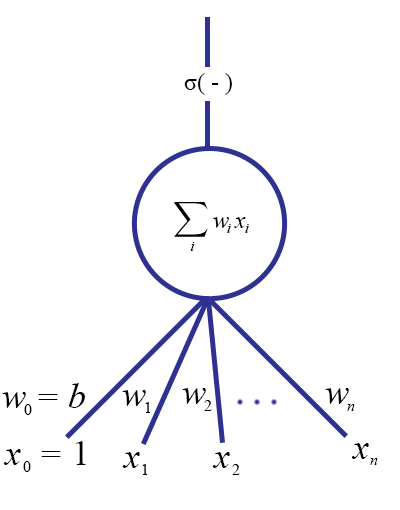
<style>
.page{position:relative;width:400px;height:510px;background:#ffffff}
.page>*{position:absolute;margin:0}
.t1{font:24px "TimesNewRomanPSMT";color:#000000}
.t2{font:24px "TimesNewRomanPS-ItalicMT";color:#000000}
.t3{font:14px "TimesNewRomanPS-ItalicMT";color:#000000}
.t4{font:36px "TimesNewRomanPS-ItalicMT";color:#000000}
.t5{font:16.4px "TimesNewRomanPSMT";color:#000000}
.t6{font:16.4px "TimesNewRomanPS-ItalicMT";color:#000000}
.t7{font:36px "TimesNewRomanPSMT";color:#000000}
</style>
<div class="page">
<p class="t1" style="left:184px;top:73px;width:48px;height:22px">σ( - )</p>
<p class="t2" style="left:213px;top:217px;width:33px;height:11px">w x</p>
<p class="t3" style="left:227px;top:224px;width:22px;height:9px">i    i</p>
<p class="t3" style="left:190px;top:242px;width:5px;height:9px">i</p>
<p class="t4" style="left:2px;top:383px;width:83px;height:25px">w = b</p>
<p class="t4" style="left:122px;top:390px;width:24px;height:16px">w</p>
<p class="t4" style="left:182px;top:388px;width:24px;height:16px">w</p>
<p class="t4" style="left:325px;top:388px;width:24px;height:16px">w</p>
<p class="t5" style="left:204px;top:400px;width:8px;height:11px">2</p>
<p class="t5" style="left:24px;top:404px;width:8px;height:11px">0</p>
<p class="t5" style="left:145px;top:402px;width:6px;height:11px">1</p>
<p class="t6" style="left:347px;top:404px;width:8px;height:7px">n</p>
<p class="t4" style="left:3px;top:441px;width:83px;height:24px">x  = <span class="t7">1</span></p>
<p class="t4" style="left:351px;top:443px;width:18px;height:16px">x</p>
<p class="t5" style="left:23px;top:461px;width:8px;height:11px">0</p>
<p class="t4" style="left:122px;top:452px;width:18px;height:16px">x</p>
<p class="t4" style="left:212px;top:452px;width:18px;height:16px">x</p>
<p class="t6" style="left:370px;top:458px;width:8px;height:7px">n</p>
<p class="t5" style="left:142px;top:464px;width:6px;height:11px">1</p>
<p class="t5" style="left:232px;top:464px;width:8px;height:11px">2</p>
</div>
